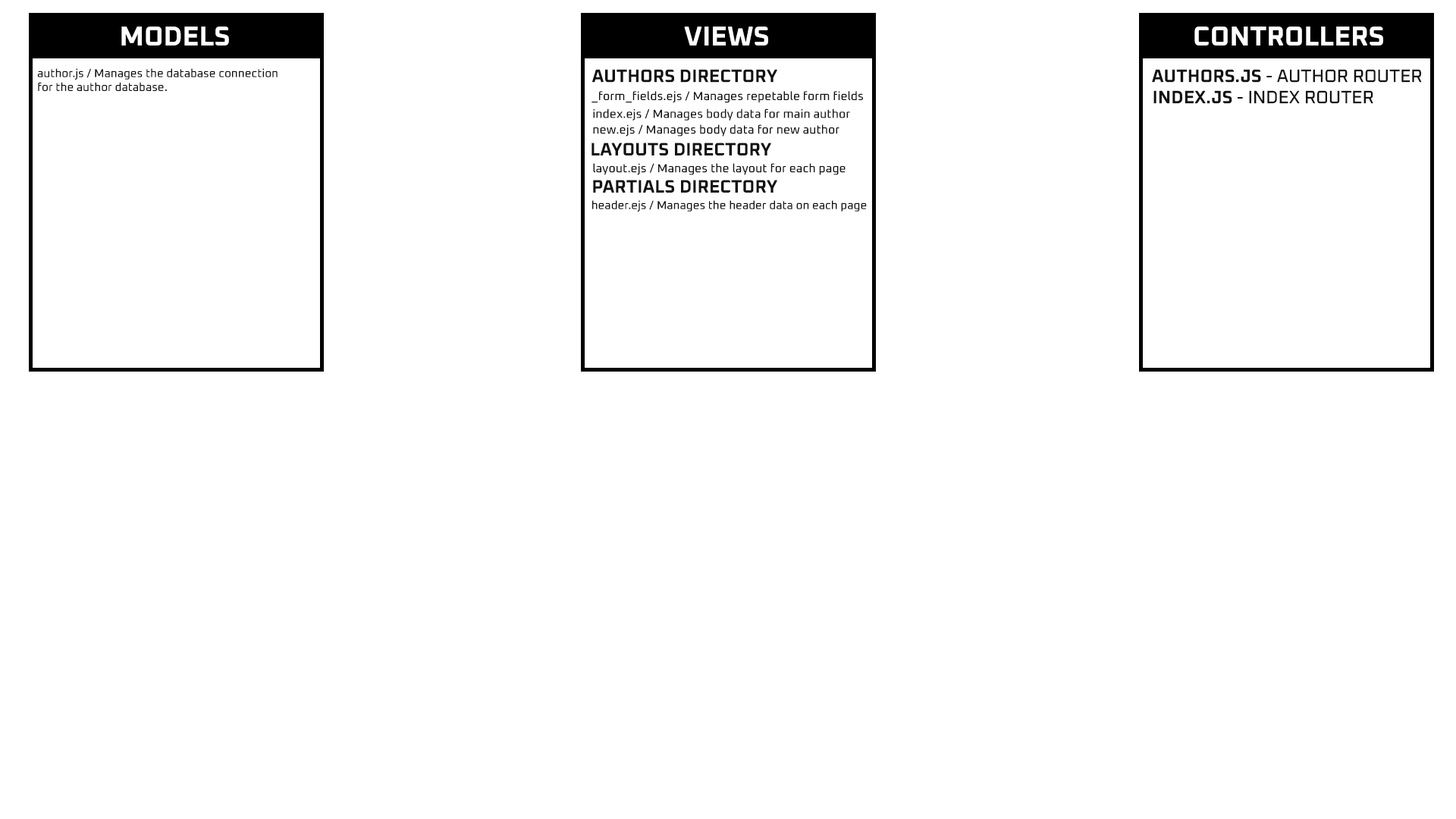
<style>
.page{position:relative;width:1456px;height:819px;background:#ffffff}
.page>*{position:absolute;margin:0}
.t1{font:27.5px "Oxanium-Bold";color:#ffffff}
.t2{font:11.5px "Oxanium-Medium";color:#121212}
.t3{font:18px "Oxanium-Bold";color:#121212}
.t4{font:18px "Oxanium-Medium";color:#121212}
.t5{font:12px "Oxanium-Medium";color:#121212}
</style>
<div class="page">
<p class="t1" style="left:121px;top:27px;width:108px;height:18px">MODELS</p>
<p class="t1" style="left:684px;top:27px;width:84px;height:18px">VIEWS</p>
<p class="t1" style="left:1194px;top:27px;width:189px;height:18px">CONTROLLERS</p>
<p class="t2" style="left:37px;top:68px;width:241px;height:23px">author.js / Manages the database connection<br>for the author database.</p>
<p class="t3" style="left:592px;top:69px;width:185px;height:14px">AUTHORS DIRECTORY</p>
<p class="t4" style="left:1152px;top:69px;width:270px;height:14px"><span class="t3">AUTHORS.JS</span> - AUTHOR ROUTER</p>
<p class="t5" style="left:591px;top:91px;width:272px;height:12px">_form_fields.ejs / Manages repetable form fields</p>
<p class="t4" style="left:1153px;top:90px;width:220px;height:14px"><span class="t3">INDEX.JS</span> - INDEX ROUTER</p>
<p class="t5" style="left:593px;top:108px;width:257px;height:13px">index.ejs / Manages body data for main author</p>
<p class="t5" style="left:593px;top:124px;width:246px;height:12px">new.ejs / Manages body data for new author</p>
<p class="t3" style="left:591px;top:143px;width:180px;height:12px">LAYOUTS DIRECTORY</p>
<p class="t5" style="left:593px;top:163px;width:253px;height:12px">layout.ejs / Manages the layout for each page</p>
<p class="t3" style="left:593px;top:180px;width:184px;height:13px">PARTIALS DIRECTORY</p>
<p class="t2" style="left:592px;top:200px;width:275px;height:12px">header.ejs / Manages the header data on each page</p>
</div>
